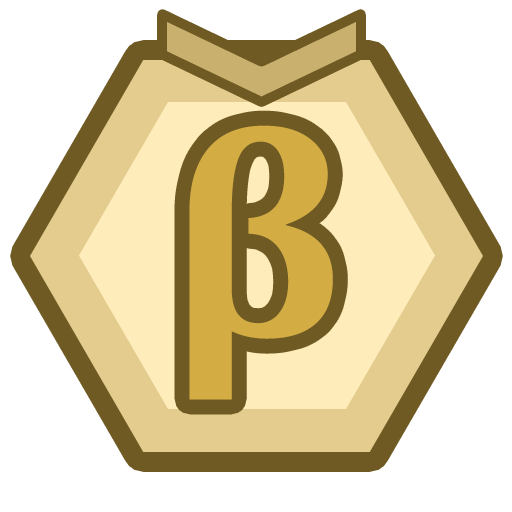
<style>
.page{position:relative;width:512px;height:512px;background:#ffffff}
.page>*{position:absolute;margin:0}
.t1{font:300px "Cambria-Bold";color:#d3ac44}
</style>
<div class="page">
<p class="t1" style="left:189px;top:125px;width:144px;height:275px">β</p>
</div>
